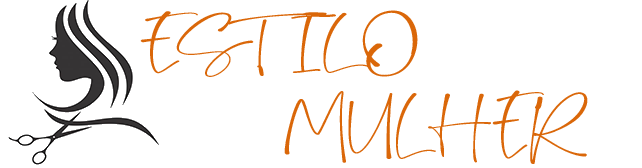
<style>
.page{position:relative;width:642px;height:168px;background:#ffffff}
.page>*{position:absolute;margin:0}
.t1{font:48.1px "BrilliantStarlightRegular";letter-spacing:-0.04em;color:#da6709;text-transform:uppercase;scale:1.75 1}
.t2{font:52.7px "BrilliantStarlightRegular";letter-spacing:-0.04em;color:#da6709;text-transform:uppercase;scale:1.43 1}
</style>
<div class="page">
<p class="t1" style="left:140px;top:10px;width:278px;height:67px">Estilo</p>
<p class="t2" style="left:284px;top:90px;width:304px;height:74px">Mulher</p>
</div>
